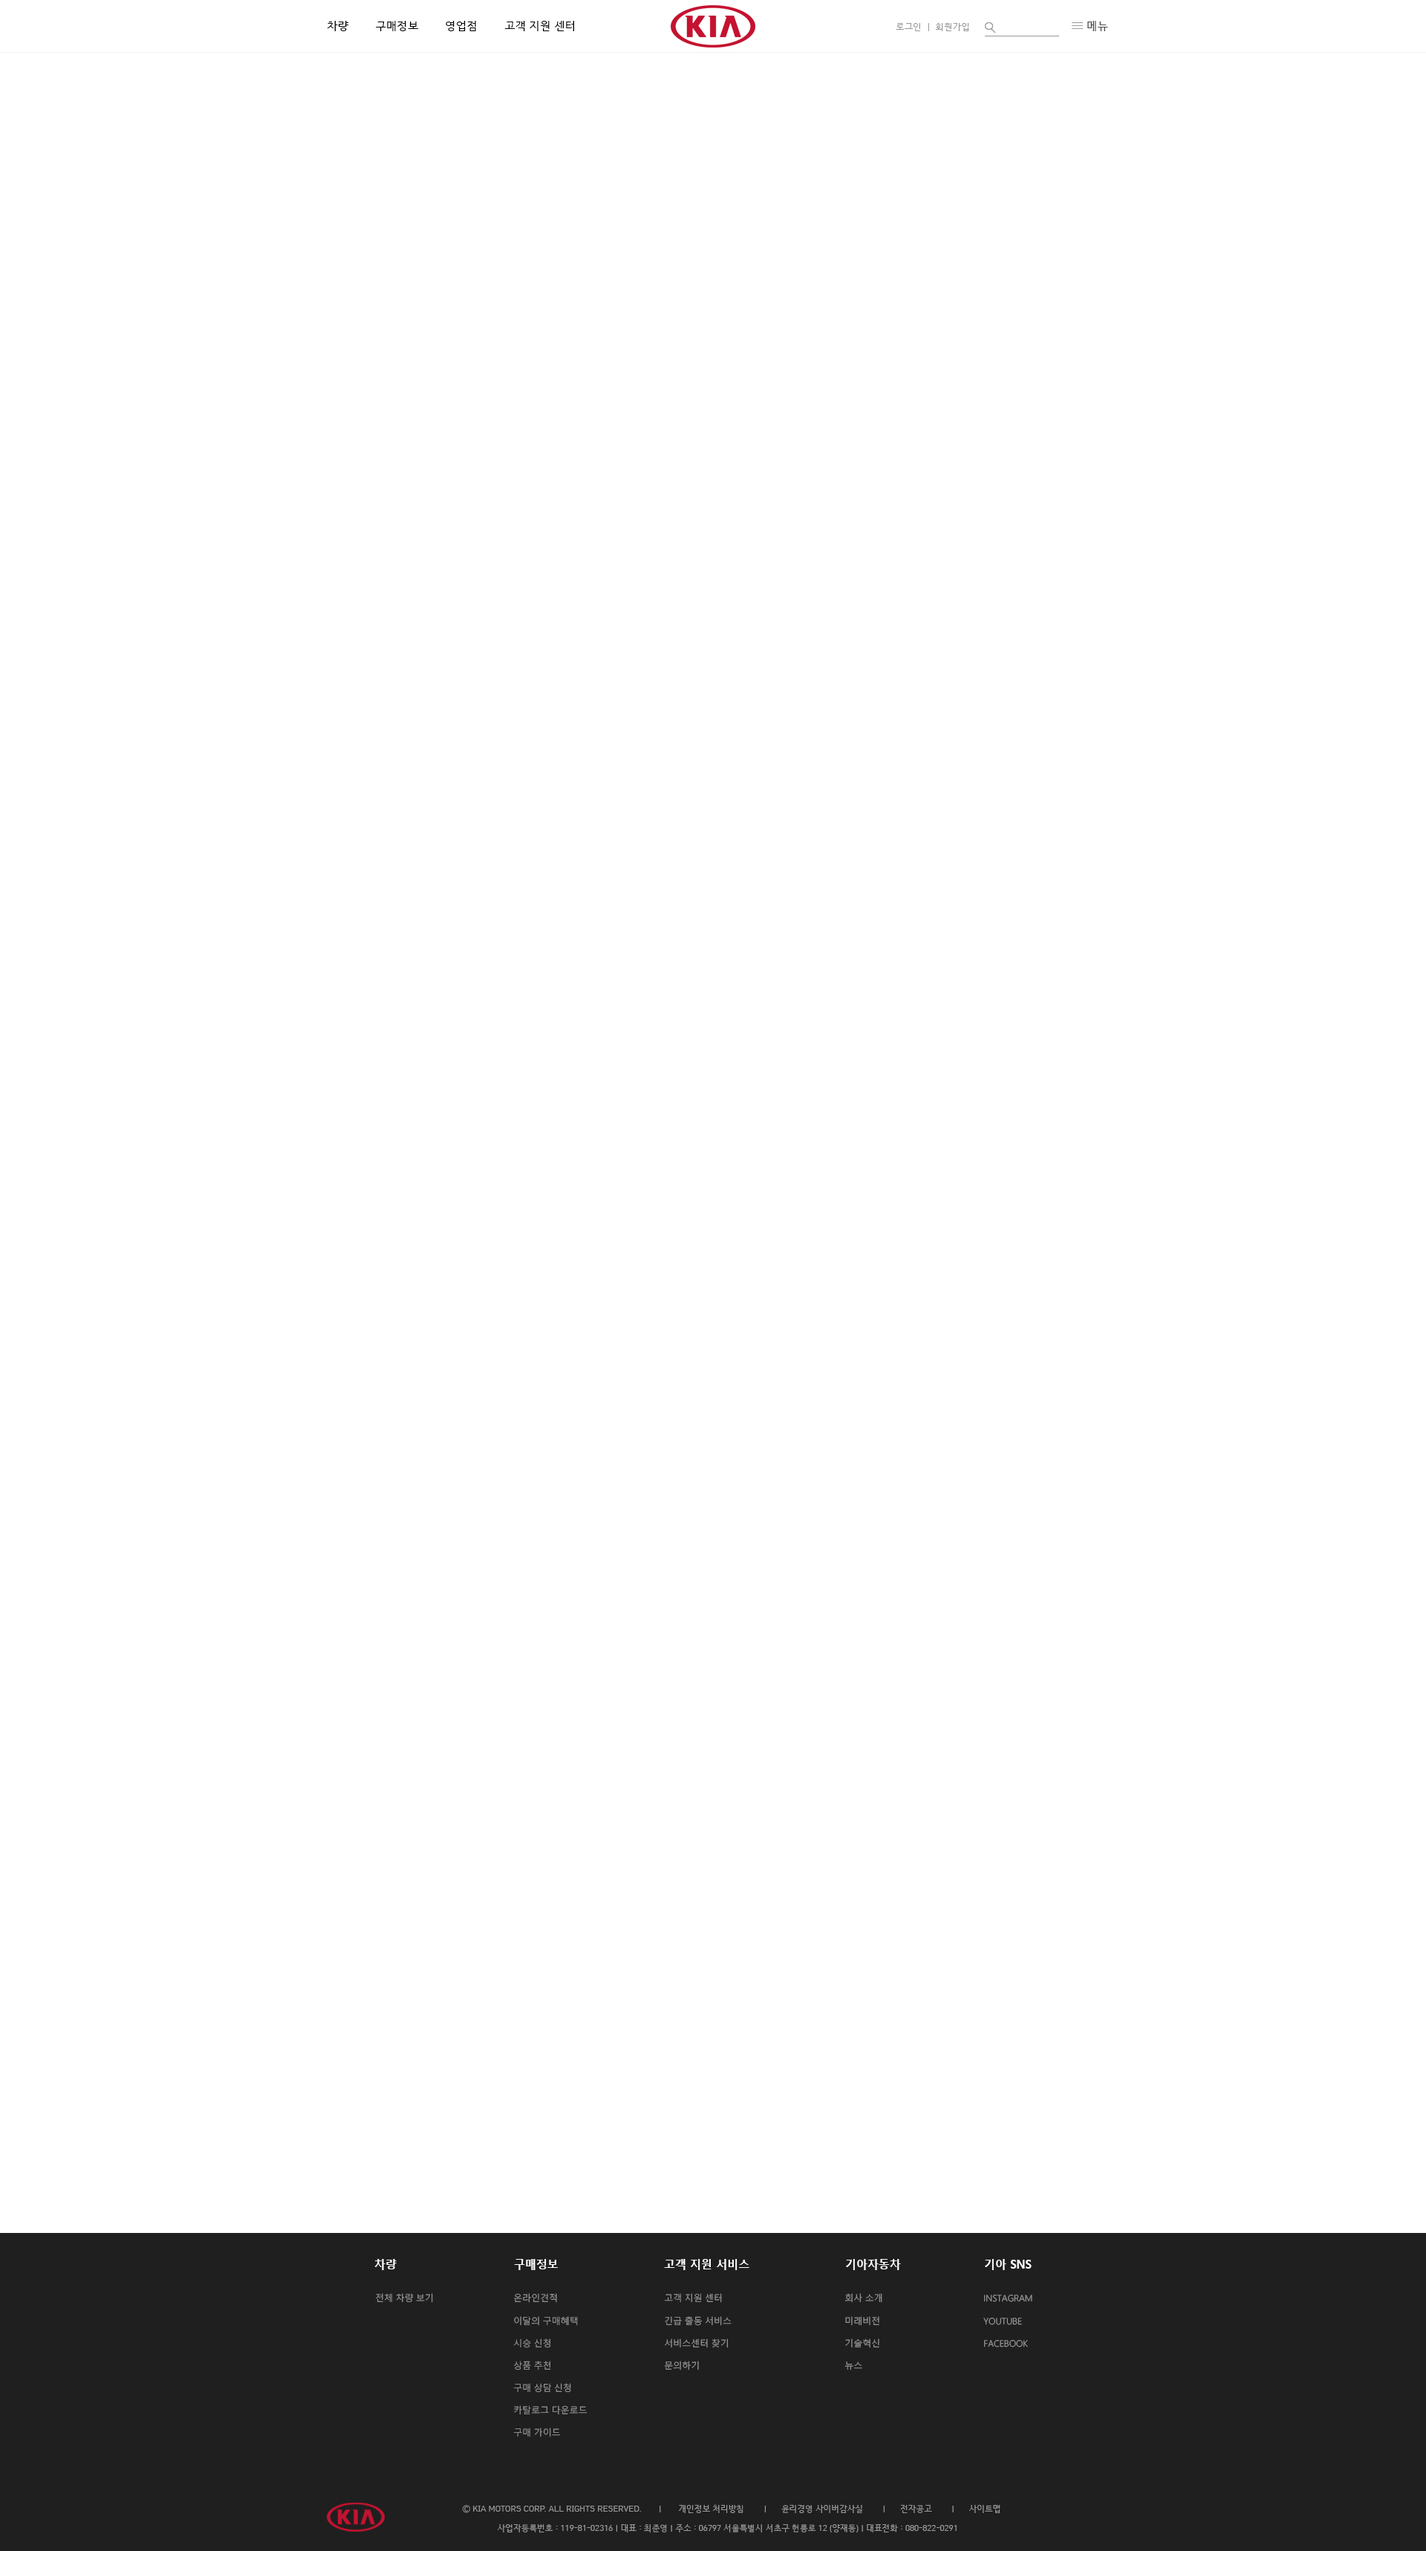
<style>
.page{position:relative;width:1426px;height:2551px;background:#ffffff}
.page>*{position:absolute;margin:0}
.t1{font:11.1px "HCRDotum";color:#000000}
.t2{font:8.9px "HCRDotum";color:#979797}
.t3{font:11.1px "HCRDotum";color:#4c4c4c}
.t4{font:11.5px "MalgunGothicBold";color:#ffffff;scale:0.96 1}
.t5{font:9px "MalgunGothic-Semilight";color:#979797}
.t6{font:9px/22.4px "MalgunGothic-Semilight";color:#979797}
.t7{font:8.2px "HCRDotum";color:#999999}
</style>
<div class="page">
<p class="t1" style="left:327px;top:21px;width:247px;height:10px">차량        구매정보        영업점        고객 지원 센터</p>
<p class="t2" style="left:896px;top:23px;width:74px;height:8px">로그인  |  회원가입</p>
<p class="t3" style="left:1088px;top:21px;width:20px;height:10px">메뉴</p>
<p class="t4" style="left:374px;top:2259px;width:23px;height:11px">차량</p>
<p class="t4" style="left:514px;top:2259px;width:44px;height:11px">구매정보</p>
<p class="t4" style="left:664px;top:2259px;width:86px;height:11px">고객 지원 서비스</p>
<p class="t4" style="left:846px;top:2259px;width:55px;height:11px">기아자동차</p>
<p class="t4" style="left:985px;top:2259px;width:47px;height:11px">기아 SNS</p>
<p class="t5" style="left:376px;top:2293px;width:57px;height:9px">전체 차량 보기</p>
<p class="t6" style="left:513px;top:2293px;width:75px;height:144px">온라인견적<br>이달의 구매혜택<br>시승 신청<br>상품 추천<br>구매 상담 신청<br>카탈로그 다운로드<br>구매 가이드</p>
<p class="t6" style="left:664px;top:2293px;width:68px;height:77px">고객 지원 센터<br>긴급 출동 서비스<br>서비스센터 찾기<br>문의하기</p>
<p class="t6" style="left:845px;top:2293px;width:38px;height:77px">회사 소개<br>미래비전<br>기술혁신<br>뉴스</p>
<p class="t6" style="left:984px;top:2294px;width:49px;height:53px">INSTAGRAM<br>YOUTUBE<br>FACEBOOK</p>
<p class="t7" style="left:462px;top:2504px;width:539px;height:9px">Ⓒ KIA MOTORS CORP. ALL RIGHTS RESERVED.       |       개인정보 처리방침        |      윤리경영 사이버감사실        |      전자공고        |      사이트맵</p>
<p class="t7" style="left:498px;top:2524px;width:459px;height:8px">사업자등록번호 : 119-81-02316 | 대표 : 최준영 | 주소 : 06797 서울특별시 서초구 헌릉로 12 (양재동) | 대표전화 : 080-822-0291</p>
</div>
